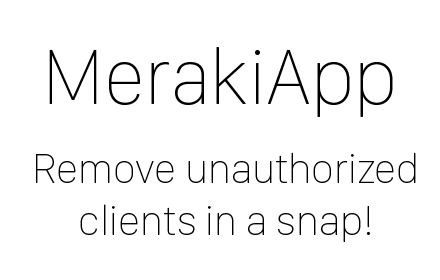
<style>
.page{position:relative;width:440px;height:280px;background:#ffffff}
.page>*{position:absolute;margin:0}
.t1{font:80.7px "SanFranciscoDisplay-Ultralight";color:#000000}
.t2{font:43px "SanFranciscoDisplay-Ultralight";color:#000000}
</style>
<div class="page">
<p class="t1" style="left:49px;top:47px;width:344px;height:70px">MerakiApp</p>
<p class="t2" style="left:36px;top:152px;width:380px;height:90px;text-align:center">Remove unauthorized<br>clients in a snap!</p>
</div>
